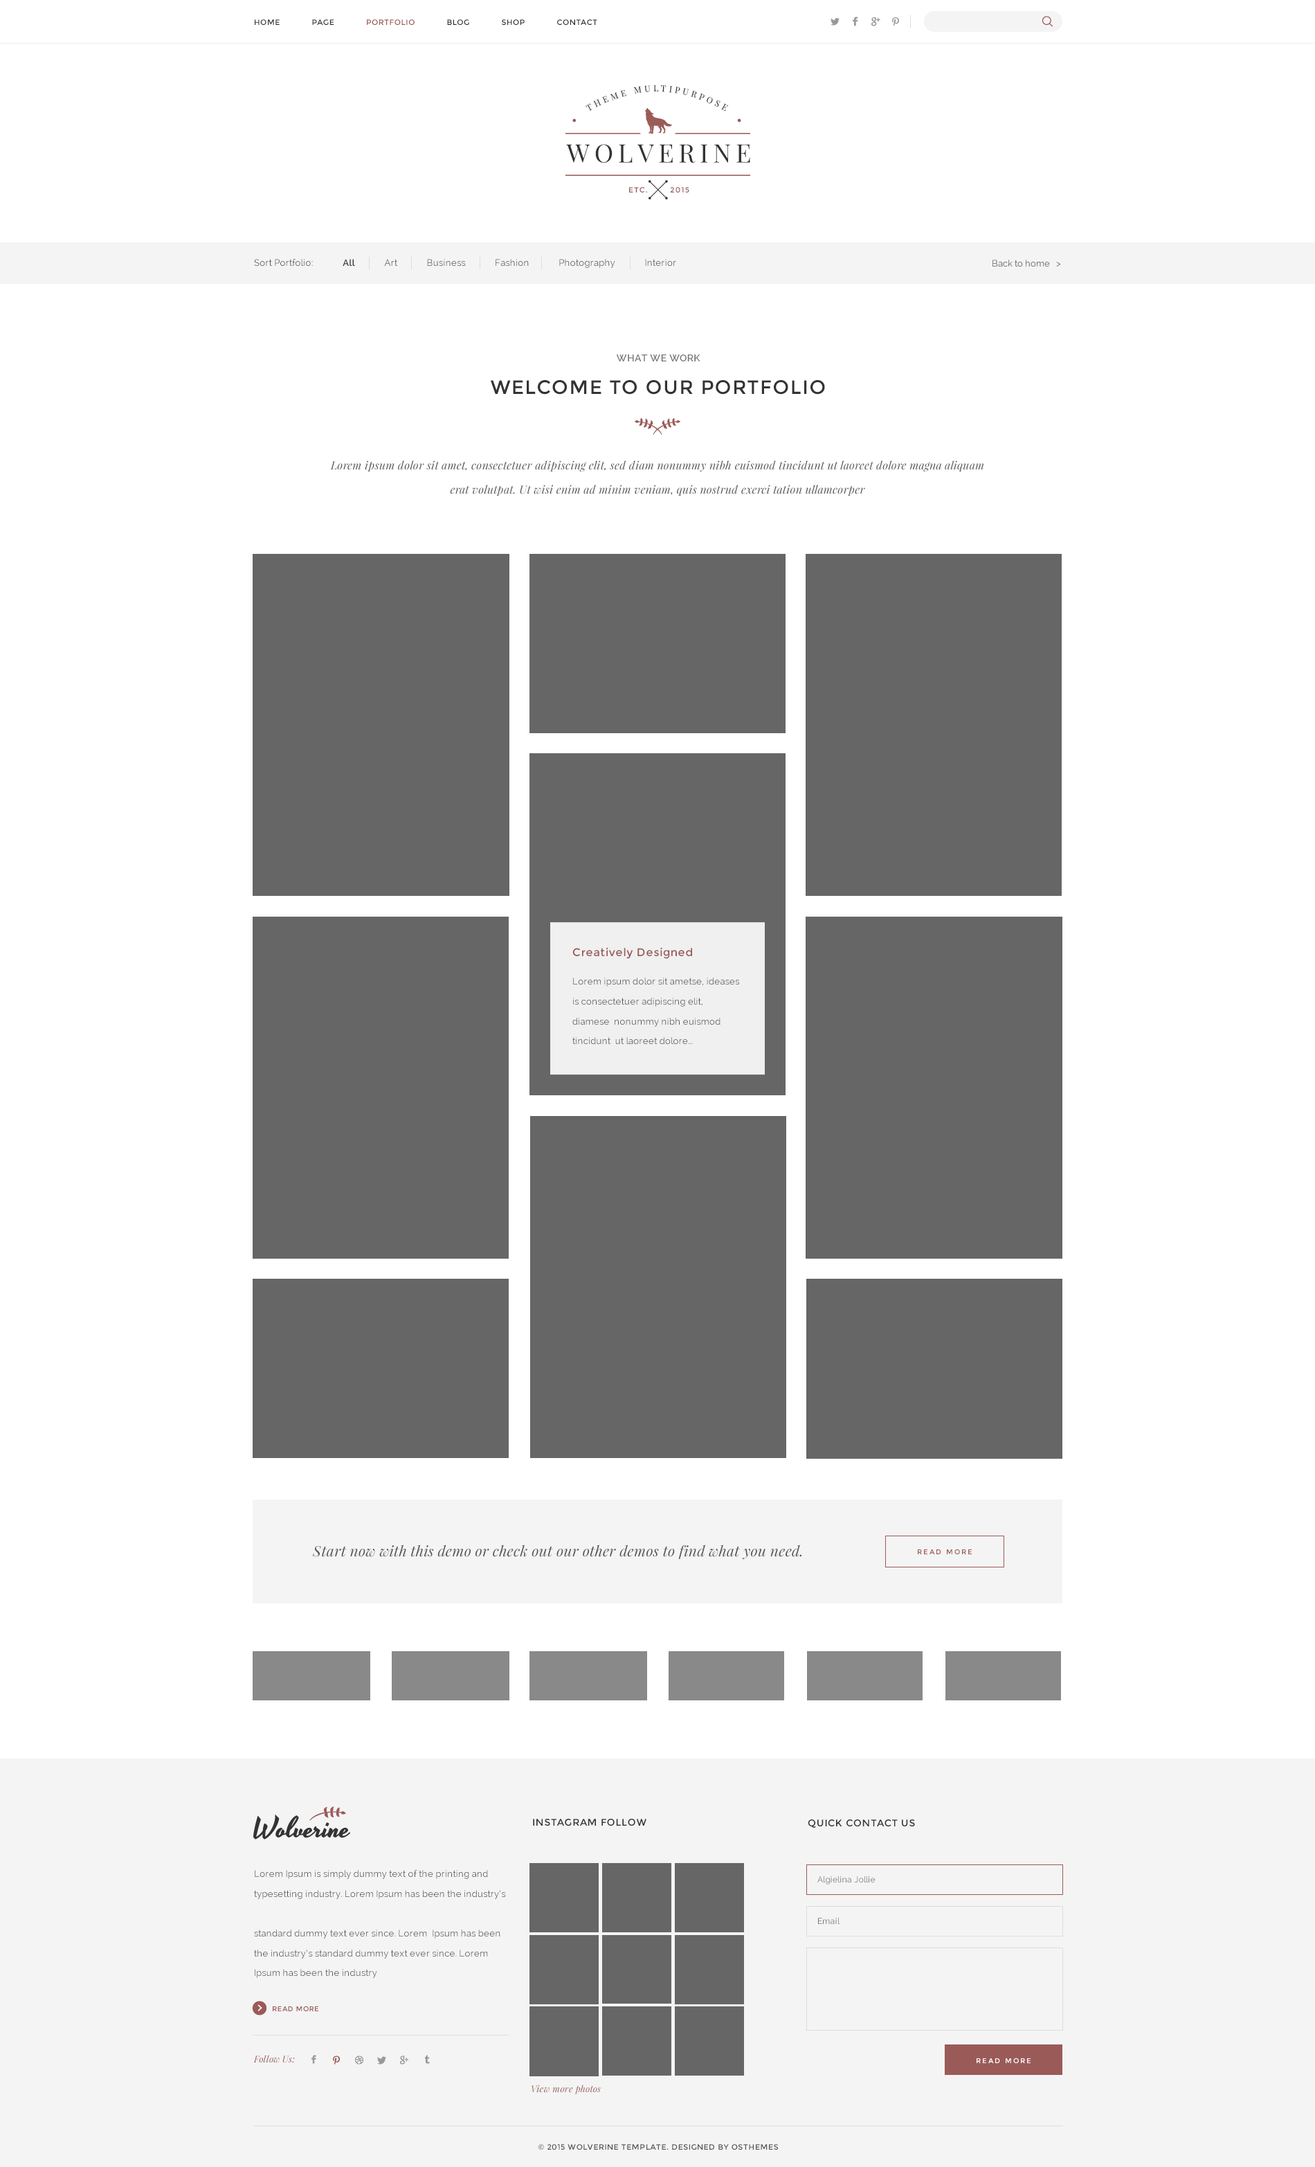
<style>
.page{position:relative;width:1315px;height:2167px;background:#ffffff}
.page>*{position:absolute;margin:0}
.t1{font:7.6px "Montserrat-Regular";letter-spacing:0.05em;color:#333333}
.t2{font:7.6px "Montserrat-Regular";letter-spacing:0.05em;color:#9d5b55}
.t3{font:8.5px/19.6px "PlayfairDisplay-Regular";letter-spacing:0.35em;color:#333333;text-transform:uppercase}
.t4{font:25.6px "PlayfairDisplay-Regular";letter-spacing:0.1em;color:#333333}
.t5{font:7.5px "Montserrat-Regular";color:#9a5a58}
.t6{font:9px "Raleway";letter-spacing:0.02em;color:#545454}
.t7{font:9px "Raleway-SemiBold";letter-spacing:0.02em;color:#333333}
.t8{font:9px "Raleway"}
.t9{font:9.7px "Raleway-SemiBold";letter-spacing:0.05em;color:#777777}
.t10{font:19.4px "Montserrat-Regular";letter-spacing:0.05em;color:#333333}
.t11{font:11.1px/24.4px "PlayfairDisplay-Italic";letter-spacing:0.02em;color:#545454}
.t12{font:11.1px "Montserrat-Regular";letter-spacing:0.05em;color:#9a5a58}
.t13{font:9px/19.8px "Raleway";letter-spacing:0.02em;color:#555555}
.t14{font:14.5px "PlayfairDisplay-Italic";letter-spacing:0.02em;color:#555555}
.t15{font:6.9px "Montserrat-Regular";letter-spacing:0.2em;color:#9a5a58}
.t16{font:9.7px "Montserrat-Regular";letter-spacing:0.05em;color:#333333}
.t17{font:8.3px "Raleway";letter-spacing:0.02em;color:#777777}
.t18{font:6.9px "Montserrat-Regular";letter-spacing:0.05em;color:#9a5a58}
.t19{font:9px "PlayfairDisplay-Italic";letter-spacing:0.02em;color:#995958}
.t20{font:6.9px "Montserrat-Regular";letter-spacing:0.2em;color:#ffffff}
.t21{font:9px "PlayfairDisplay-Italic";letter-spacing:0.02em;color:#9a5a58}
.t22{font:7.6px "Montserrat-Regular";letter-spacing:0.05em;color:#555555}
</style>
<div class="page">
<p class="t1" style="left:255px;top:19px;width:342px;height:6px">HOME      PAGE      <span class="t2">PORTFOLIO</span>      BLOG      SHOP      CONTACT</p>
<p class="t3" style="left:586px;top:85px;width:142px;height:26px;text-align:center">Theme Multipurpose</p>
<p class="t4" style="left:566px;top:144px;width:184px;height:19px">WOLVERINE</p>
<p class="t5" style="left:629px;top:187px;width:18px;height:5px">ETC.</p>
<p class="t5" style="left:670px;top:187px;width:20px;height:5px">2015</p>
<p class="t6" style="left:254px;top:259px;width:422px;height:9px">Sort Portfolio:             <span class="t7">All </span>            Art             Business             Fashion             Photography             Interior</p>
<p class="t8" style="left:993px;top:260px;width:68px;height:7px">Back to home   &gt;</p>
<p class="t9" style="left:616px;top:354px;width:85px;height:7px">WHAT WE WORK</p>
<p class="t10" style="left:490px;top:380px;width:335px;height:15px">WELCOME TO OUR PORTFOLIO</p>
<p class="t11" style="left:330px;top:460px;width:654px;height:36px;text-align:center">Lorem ipsum dolor sit amet, consectetuer adipiscing elit, sed diam nonummy nibh euismod tincidunt ut laoreet dolore magna aliquam erat volutpat. Ut wisi enim ad minim veniam, quis nostrud exerci tation ullamcorper</p>
<p class="t12" style="left:573px;top:947px;width:119px;height:12px">Creatively Designed</p>
<p class="t13" style="left:573px;top:978px;width:166px;height:67px">Lorem ipsum dolor sit ametse, ideases is consectetuer adipiscing elit, diamese  nonummy nibh euismod tincidunt  ut laoreet dolore...</p>
<p class="t14" style="left:312px;top:1545px;width:490px;height:14px">Start now with this demo or check out our other demos to find what you need.</p>
<p class="t15" style="left:918px;top:1549px;width:54px;height:5px">READ MORE</p>
<p class="t16" style="left:533px;top:1819px;width:114px;height:7px">INSTAGRAM FOLLOW</p>
<p class="t16" style="left:808px;top:1819px;width:107px;height:9px">QUICK CONTACT US</p>
<p class="t13" style="left:254px;top:1870px;width:252px;height:108px">Lorem Ipsum is simply dummy text of the printing and typesetting industry. Lorem Ipsum has been the industry’s <br> <br>standard dummy text ever since. Lorem  Ipsum has been the industry’s standard dummy text ever since. Lorem  Ipsum has been the industry</p>
<p class="t17" style="left:818px;top:1876px;width:58px;height:8px">Algielina Jollie</p>
<p class="t17" style="left:818px;top:1918px;width:22px;height:6px">Email</p>
<p class="t18" style="left:273px;top:2006px;width:45px;height:5px">READ MORE</p>
<p class="t19" style="left:253px;top:2055px;width:42px;height:8px">Follow Us:</p>
<p class="t20" style="left:977px;top:2058px;width:54px;height:5px">READ MORE</p>
<p class="t21" style="left:532px;top:2085px;width:69px;height:9px">View more photos</p>
<p class="t22" style="left:538px;top:2144px;width:241px;height:6px">© 2015 WOLVERINE TEMPLATE. DESIGNED BY OSTHEMES</p>
</div>
